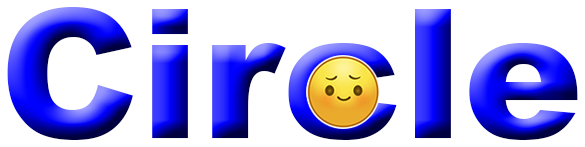
<style>
.page{position:relative;width:585px;height:147px;background:#ffffff}
.page>*{position:absolute;margin:0}
.t1{font:180px "Arial-Black";letter-spacing:0.005em}
</style>
<div class="page">
<p class="t1" style="left:7px;top:7px;width:571px;height:133px">Circle</p>
</div>
